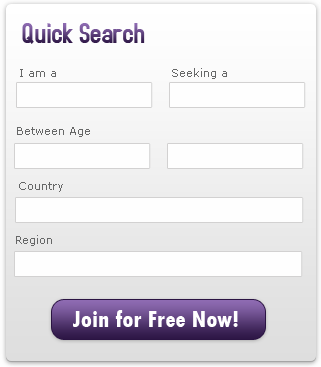
<style>
.page{position:relative;width:321px;height:367px;background:#fefefe}
.page>*{position:absolute;margin:0}
.t1{font:30px "AccidentalPresidency"}
.t2{font:11px "Verdana";color:#666767}
.t3{font:24px "TwCenMT-CondensedExtraBold";color:#ffffff}
</style>
<div class="page">
<p class="t1" style="left:22px;top:23px;width:123px;height:21px">Quick Search</p>
<p class="t2" style="left:20px;top:69px;width:36px;height:8px">I am a</p>
<p class="t2" style="left:172px;top:68px;width:55px;height:11px">Seeking a</p>
<p class="t2" style="left:17px;top:127px;width:73px;height:10px">Between Age</p>
<p class="t2" style="left:19px;top:182px;width:44px;height:10px">Country</p>
<p class="t2" style="left:16px;top:235px;width:36px;height:11px">Region</p>
<p class="t3" style="left:73px;top:310px;width:165px;height:17px">Join for Free Now!</p>
</div>
